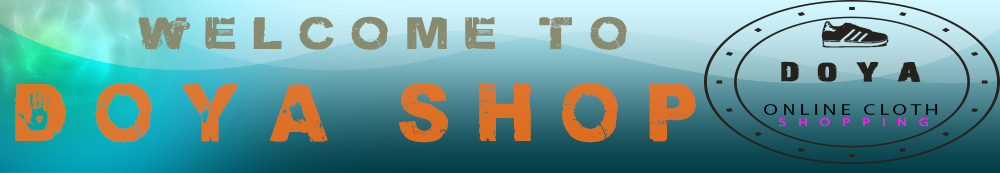
<style>
.page{position:relative;width:1000px;height:173px}
.page>*{position:absolute;margin:0}
.t1{font:38.5px "DamnedDeluxe-Normal";letter-spacing:0.35em;color:#898b71;scale:1.1 1}
.t2{font:25.1px/36.9px "28-Days-Later-Regular";letter-spacing:0.46em;color:#25221d;font-weight:bold;scale:1.48 1}
.t3{font:37px/13.9px "Sneakers";letter-spacing:-0.12em;color:#25221d;font-weight:bold}
.t4{font:37px/13.9px "Sneakers";letter-spacing:0.02em;color:#25221d;font-weight:bold}
.t5{font:69.3px "DamnedDeluxe-Normal";letter-spacing:0.39em;color:#eb7015;scale:0.94 1}
.t6{font:15px "MyriadPro-Regular";letter-spacing:0.2em;color:#000000;scale:1.38 1}
.t7{font:11.7px "MyriadPro-Regular";letter-spacing:0.2em;color:#25221d;scale:1.38 1}
.t8{font:10.8px "MyriadPro-Regular";letter-spacing:0.8em;color:#ff16f3;scale:1.38 1}
.t9{font:5.4px "MyriadPro-Regular";letter-spacing:0.8em;color:#25221d;scale:1.38 1}
</style>
<div class="page">
<p class="t1" style="left:138px;top:16px;width:489px;height:34px">welcome to</p>
<p class="t2" style="left:781px;top:21px;width:140px;height:61px"><span class="t3">       </span><span class="t4">A<br></span>DOYA</p>
<p class="t5" style="left:15px;top:83px;width:681px;height:60px;opacity:0.9">doya shop</p>
<p class="t6" style="left:764px;top:104px;width:174px;height:11px"><span class="t7">              </span>ONLINE CLOTH</p>
<p class="t8" style="left:779px;top:118px;width:149px;height:8px"><span class="t9">        </span>SHOPPING</p>
</div>
